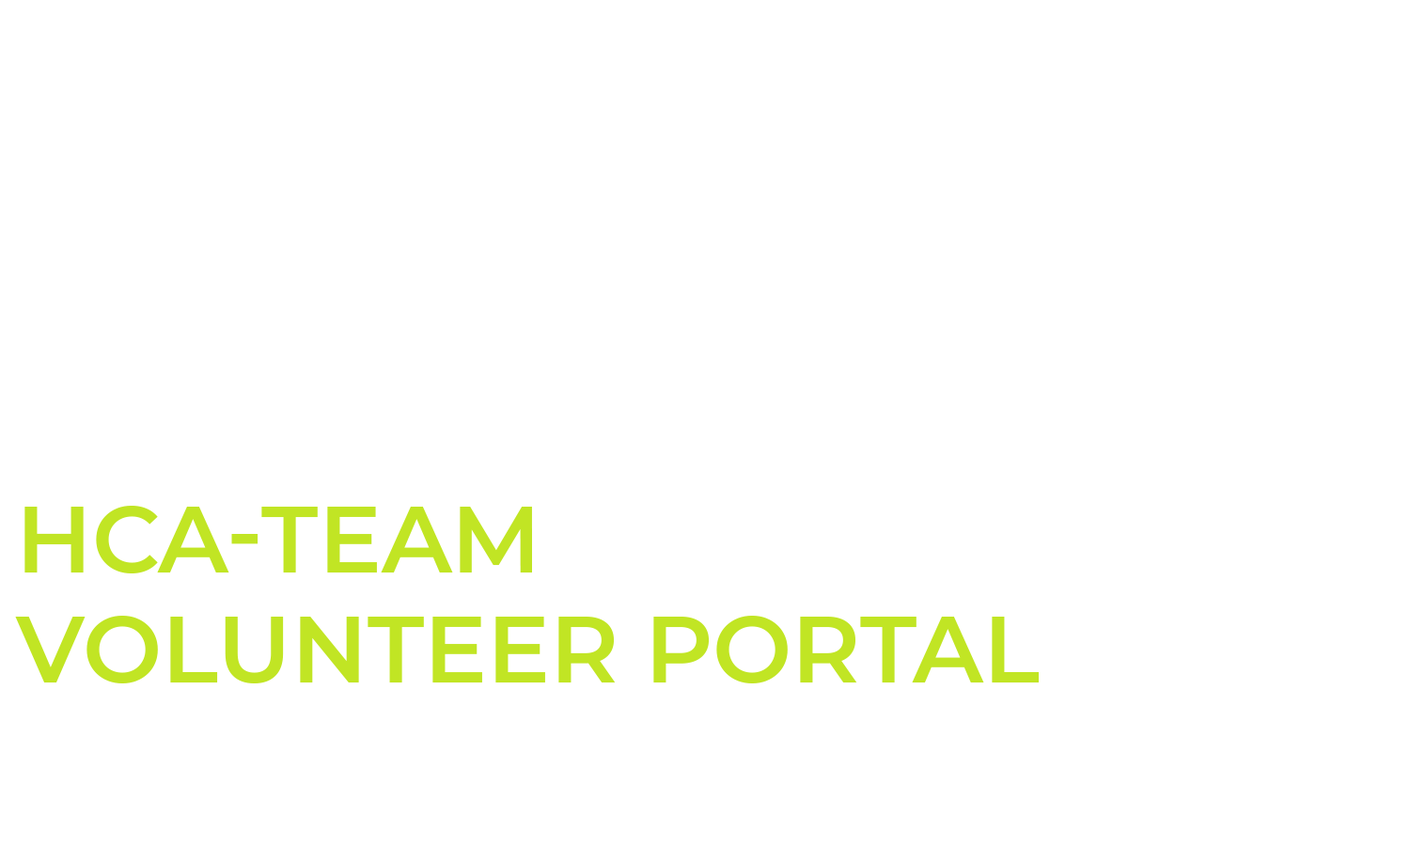
<style>
.page{position:relative;width:1410px;height:846px;background:#ffffff}
.page>*{position:absolute;margin:0}
.t1{font:94px/0.2px "Montserrat-SemiBold";color:#c1e524;text-transform:uppercase}
</style>
<div class="page">
<p class="t1" style="left:15px;top:506px;width:1024px;height:177px">HCA-TEAM<br>VOLUNTEER PORTAL</p>
</div>
